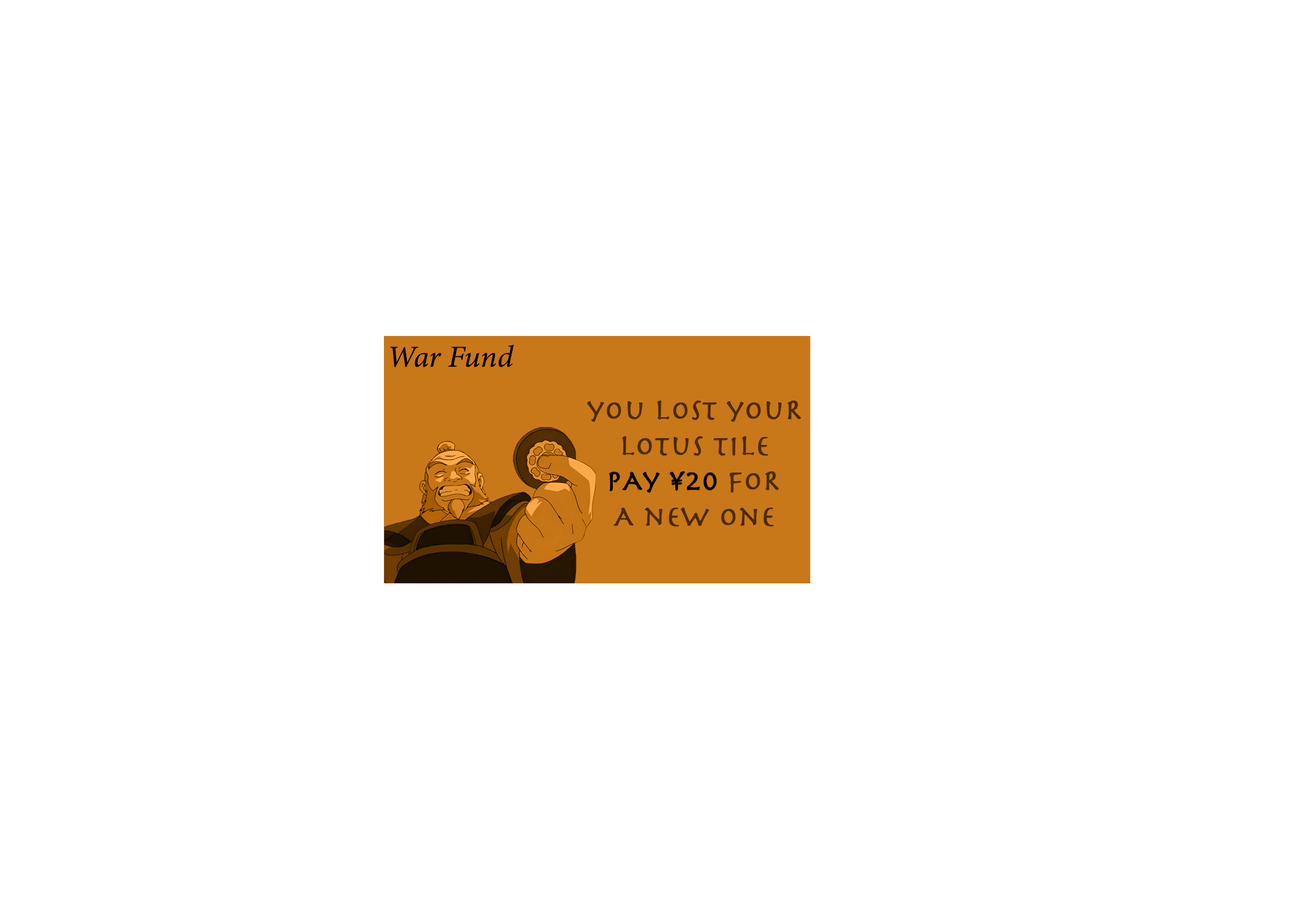
<style>
.page{position:relative;width:1292px;height:923px;background:#ffffff}
.page>*{position:absolute;margin:0}
.t1{font:30.8px "MinionConceptItalic-MediumItalic";color:#000000;font-weight:bold}
.t2{font:29.5px "Herculanum";color:#4d310e;font-weight:bold}
.t3{font:29.5px "Herculanum";color:#000000;font-weight:bold}
</style>
<div class="page">
<p class="t1" style="left:390px;top:345px;width:124px;height:22px">War Fund</p>
<p class="t2" style="left:587px;top:401px;width:214px;height:126px;text-align:center">you lost youR<br>lotus tile<br>             foR<br>A new one</p>
<p class="t3" style="left:608px;top:471px;width:109px;height:22px"><span class="t2"> <br> <br></span>PAy ¥20</p>
</div>
